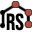
<style>
.page{position:relative;width:32px;height:32px;background:#ffffff}
.page>*{position:absolute;margin:0}
.t1{font:23px "BebasNeue-Regular";color:#000000}
</style>
<div class="page">
<p class="t1" style="left:6px;top:13px;width:18px;height:18px">RS</p>
</div>
